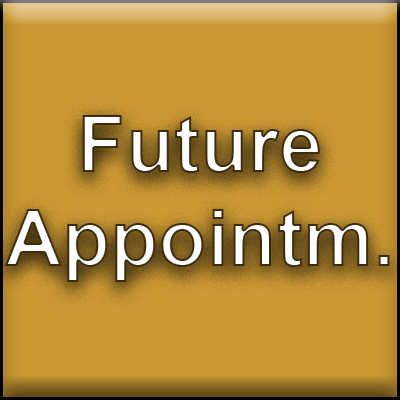
<style>
.page{position:relative;width:400px;height:400px;background:#cb9833}
.page>*{position:absolute;margin:0}
.t1{font:78.8px "Arial-BoldMT";color:#ffffff}
</style>
<div class="page">
<p class="t1" style="left:5px;top:115px;width:385px;height:167px;text-align:center">Future<br>Appointm.</p>
</div>
